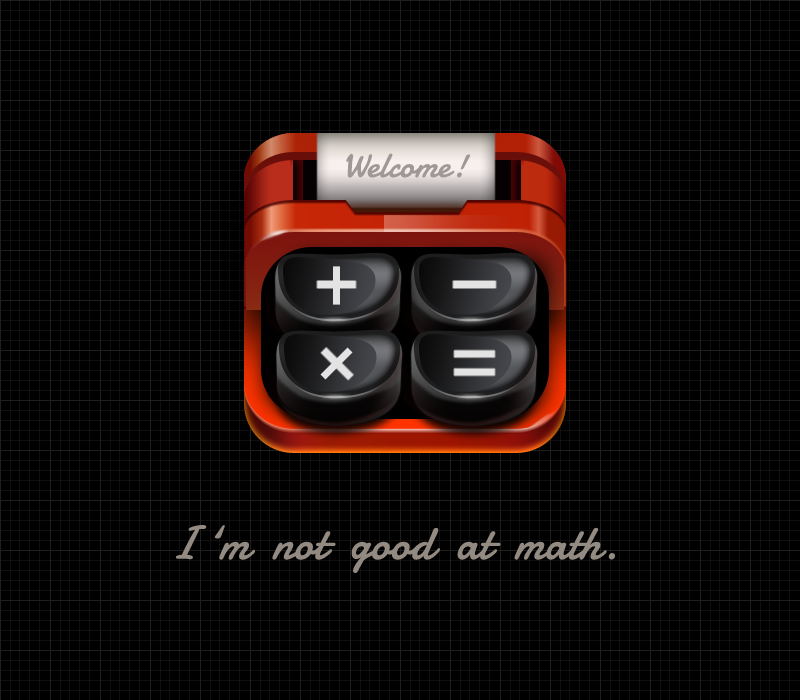
<style>
.page{position:relative;width:800px;height:700px;background:#000000}
.page>*{position:absolute;margin:0}
.t1{font:36px "Damion";color:#a09896}
.t2{font:48px "Damion";color:#938a82}
</style>
<div class="page">
<p class="t1" style="left:346px;top:153px;width:125px;height:25px">Welcome!</p>
<p class="t2" style="left:176px;top:525px;width:439px;height:48px">I ‘m  not  good  at  math.</p>
</div>
